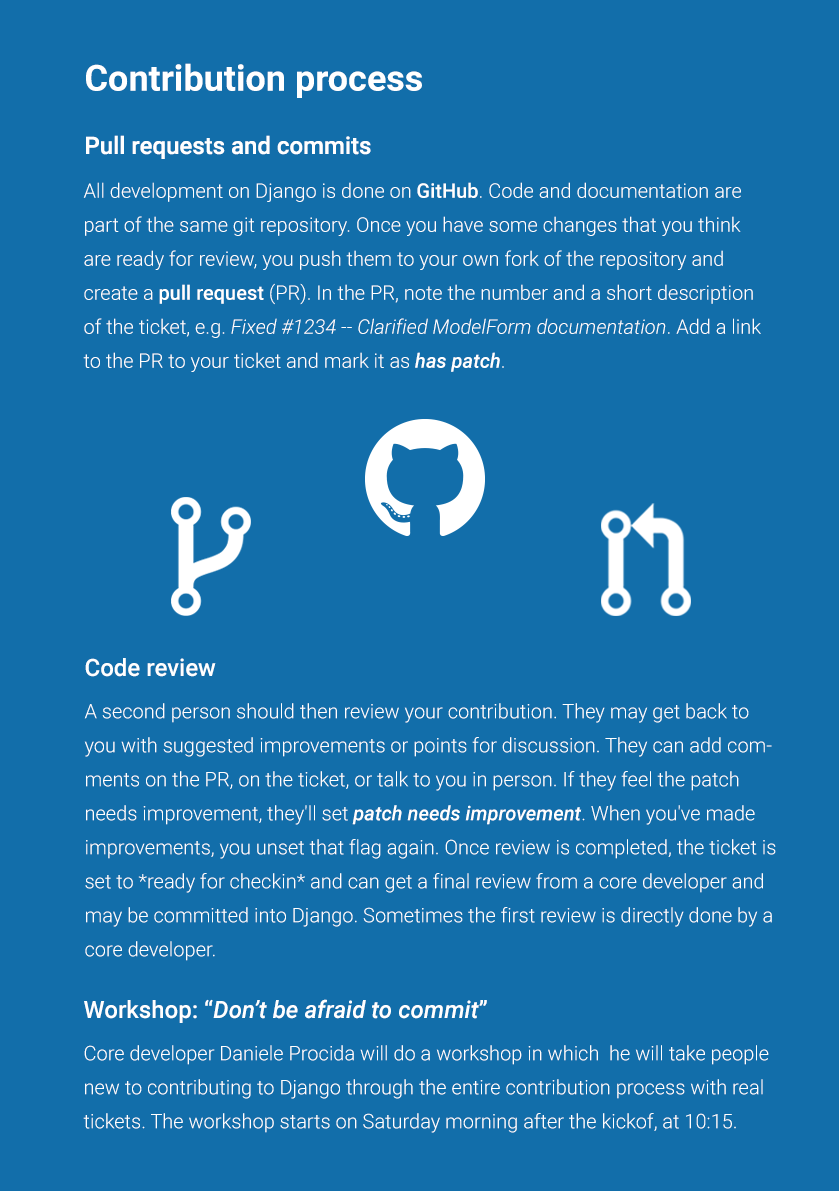
<style>
.page{position:relative;width:839px;height:1191px;background:#126eaa}
.page>*{position:absolute;margin:0}
.t1{font:36px "Roboto-Bold";color:#ffffff}
.t2{font:24px "Roboto-Medium";color:#ffffff}
.t3{font:20px/34px "Roboto-Light";color:#ffffff}
.t4{font:20px/34px "Roboto-Medium";color:#ffffff}
.t5{font:20px/34px "Roboto-LightItalic";color:#ffffff}
.t6{font:20px/34px "Roboto-MediumItalic";color:#ffffff}
.t7{font:24px "Roboto-MediumItalic";color:#ffffff}
</style>
<div class="page">
<p class="t1" style="left:86px;top:63px;width:336px;height:35px">Contribution process</p>
<p class="t2" style="left:86px;top:135px;width:285px;height:24px">Pull requests and commits</p>
<p class="t3" style="left:83px;top:182px;width:678px;height:190px">All development on Django is done on <span class="t4">GitHub</span>. Code and documentation are part of the same git repository. Once you have some changes that you think are ready for review, you push them to your own fork of the repository and create a <span class="t4">pull request</span> (PR). In the PR, note the number and a short description of the ticket, e.g. <span class="t5">Fixed #1234 -- Clarified ModelForm documentation</span>. Add a link to the PR to your ticket and mark it as <span class="t6">has patch</span>.</p>
<p class="t2" style="left:85px;top:658px;width:131px;height:19px">Code review</p>
<p class="t3" style="left:84px;top:703px;width:692px;height:258px">A second person should then review your contribution. They may get back to you with suggested improvements or points for discussion. They can add comments on the PR, on the ticket, or talk to you in person. If they feel the patch needs improvement, they'll set <span class="t6">patch needs improvement</span>. When you've made improvements, you unset that flag again. Once review is completed, the ticket is set to *ready for checkin* and can get a final review from a core developer and may be committed into Django. Sometimes the first review is directly done by a core developer.</p>
<p class="t7" style="left:84px;top:999px;width:403px;height:24px"><span class="t2">Workshop: “</span>Don’t be afraid to commit<span class="t2">”</span></p>
<p class="t3" style="left:83px;top:1045px;width:686px;height:88px">Core developer Daniele Procida will do a workshop in which  he will take people new to contributing to Django through the entire contribution process with real tickets. The workshop starts on Saturday morning after the kickof, at 10:15.</p>
</div>
